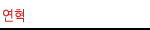
<style>
.page{position:relative;width:150px;height:30px;background:#ffffff}
.page>*{position:absolute;margin:0}
.t1{font:14px "NanumGothic";color:#dc241f;scale:0.9 1}
</style>
<div class="page">
<p class="t1" style="left:3px;top:9px;width:21px;height:14px">연혁</p>
</div>
